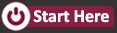
<style>
.page{position:relative;width:117px;height:33px;background:#333333}
.page>*{position:absolute;margin:0}
.t1{font:18px "Calibri-Bold";color:#ffffff}
</style>
<div class="page">
<p class="t1" style="left:33px;top:10px;width:76px;height:13px">Start Here</p>
</div>
